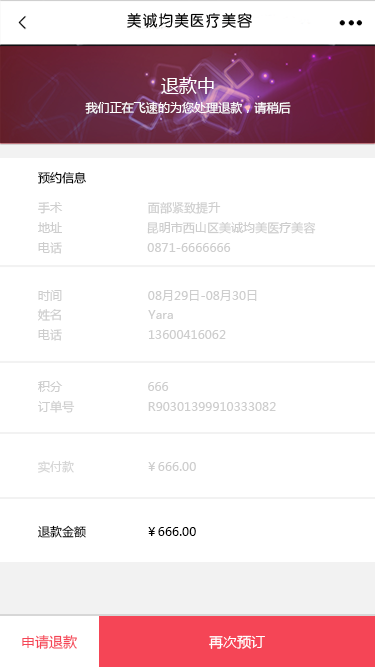
<style>
.page{position:relative;width:375px;height:667px;background:#ffffff}
.page>*{position:absolute;margin:0}
.t1{font:18px "MicrosoftYaHei";letter-spacing:0.005em;color:#ffffff}
.t2{font:12px "MicrosoftYaHei";letter-spacing:0.005em;color:#ffffff}
.t3{font:12px "MicrosoftYaHei";letter-spacing:0.005em;color:#000000}
.t4{font:12px "MicrosoftYaHei";letter-spacing:0.005em;color:#cdcdcd}
.t5{font:12px "MicrosoftYaHei";letter-spacing:0.005em;color:#d4d4d4}
.t6{font:12px "MicrosoftYaHei";letter-spacing:0.005em;color:#010101}
.t7{font:14px "MicrosoftYaHei";letter-spacing:0.005em;color:#f54556}
.t8{font:14px "MicrosoftYaHei";letter-spacing:0.005em;color:#ffffff}
</style>
<div class="page">
<p class="t1" style="left:161px;top:77px;width:53px;height:17px">退款中</p>
<p class="t2" style="left:85px;top:101px;width:206px;height:13px">我们正在飞速的为您处理退款，请稍后</p>
<p class="t3" style="left:38px;top:171px;width:48px;height:13px">预约信息</p>
<p class="t4" style="left:38px;top:202px;width:25px;height:12px">手术</p>
<p class="t4" style="left:148px;top:201px;width:73px;height:13px">面部紧致提升</p>
<p class="t4" style="left:38px;top:222px;width:24px;height:11px">地址</p>
<p class="t4" style="left:147px;top:222px;width:169px;height:12px">昆明市西山区美诚均美医疗美容</p>
<p class="t4" style="left:38px;top:242px;width:24px;height:12px">电话</p>
<p class="t4" style="left:147px;top:243px;width:84px;height:9px">0871-6666666</p>
<p class="t4" style="left:38px;top:290px;width:24px;height:11px">时间</p>
<p class="t4" style="left:148px;top:290px;width:109px;height:11px">08月29日-08月30日</p>
<p class="t4" style="left:37px;top:309px;width:24px;height:12px">姓名</p>
<p class="t4" style="left:148px;top:310px;width:25px;height:9px">Yara</p>
<p class="t4" style="left:38px;top:329px;width:24px;height:12px">电话</p>
<p class="t4" style="left:148px;top:330px;width:78px;height:9px">13600416062</p>
<p class="t4" style="left:38px;top:381px;width:25px;height:11px">积分</p>
<p class="t4" style="left:148px;top:382px;width:21px;height:9px">666</p>
<p class="t4" style="left:38px;top:400px;width:37px;height:13px">订单号</p>
<p class="t4" style="left:148px;top:402px;width:128px;height:9px">R90301399910333082</p>
<p class="t5" style="left:38px;top:460px;width:36px;height:13px">实付款</p>
<p class="t4" style="left:148px;top:462px;width:48px;height:9px">￥666.00</p>
<p class="t6" style="left:38px;top:525px;width:48px;height:13px">退款金额</p>
<p class="t3" style="left:148px;top:527px;width:48px;height:9px">￥666.00</p>
<p class="t7" style="left:22px;top:635px;width:55px;height:14px">申请退款</p>
<p class="t8" style="left:209px;top:635px;width:56px;height:14px">再次预订</p>
</div>
